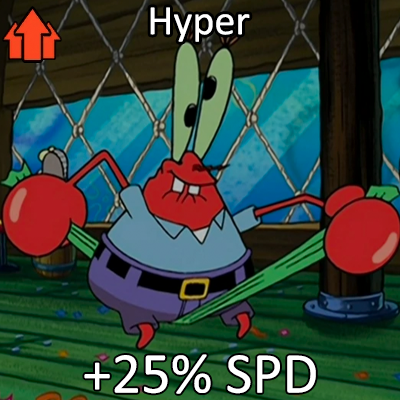
<style>
.page{position:relative;width:400px;height:400px}
.page>*{position:absolute;margin:0}
.t1{font:72px "Calibri";color:#ffffff}
.t2{font:100px "Calibri";color:#ffffff}
</style>
<div class="page">
<p class="t1" style="left:150px;top:7px;width:100px;height:35px">Hyper</p>
<p class="t2" style="left:84px;top:354px;width:232px;height:40px">+25% SPD</p>
</div>
